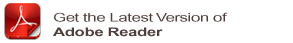
<style>
.page{position:relative;width:293px;height:43px;background:#ffffff}
.page>*{position:absolute;margin:0}
.t1{font:12px "ArialMT";letter-spacing:-0.025em;color:#4e3f3a;scale:1.4 1}
.t2{font:12px "Arial-BoldMT";letter-spacing:-0.025em;color:#4e3f3a;scale:1.4 1}
</style>
<div class="page">
<p class="t1" style="left:53px;top:12px;width:175px;height:25px">Get the Latest Version of <br><span class="t2">Adobe Reader</span></p>
</div>
